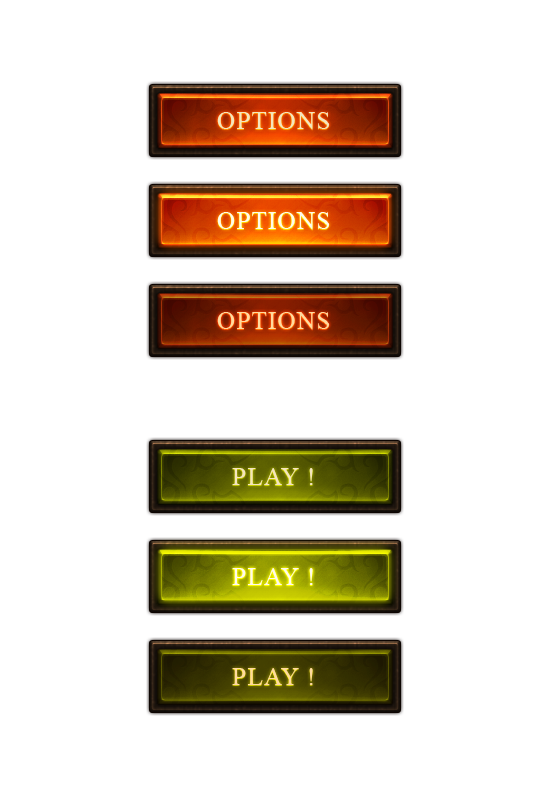
<style>
.page{position:relative;width:555px;height:800px;background:#ffffff}
.page>*{position:absolute;margin:0}
.t1{font:25px "TimesNewRomanPSMT";letter-spacing:0.05em;color:#f4e5bf;text-transform:uppercase}
.t2{font:25px "TimesNewRomanPSMT";letter-spacing:0.05em;color:#fffaed;text-transform:uppercase}
.t3{font:25px "TimesNewRomanPSMT";letter-spacing:0.05em;color:#ffda9f;text-transform:uppercase}
</style>
<div class="page">
<p class="t1" style="left:217px;top:112px;width:113px;height:18px">Options</p>
<p class="t2" style="left:217px;top:212px;width:113px;height:18px">Options</p>
<p class="t3" style="left:217px;top:312px;width:113px;height:18px">Options</p>
<p class="t1" style="left:232px;top:468px;width:81px;height:17px">Play !</p>
<p class="t2" style="left:232px;top:568px;width:81px;height:17px">Play !</p>
<p class="t3" style="left:232px;top:668px;width:81px;height:17px">Play !</p>
</div>
